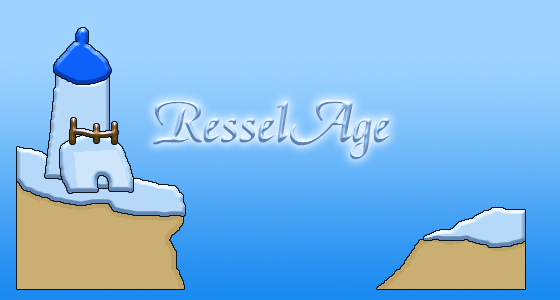
<style>
.page{position:relative;width:560px;height:300px}
.page>*{position:absolute;margin:0}
.t1{font:60px "Magik";font-weight:bold}
</style>
<div class="page">
<p class="t1" style="left:153px;top:100px;width:237px;height:60px">ResselAge</p>
</div>
